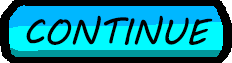
<style>
.page{position:relative;width:232px;height:63px;background:#000000}
.page>*{position:absolute;margin:0}
.t1{font:36px "MVBoli";color:#000000}
</style>
<div class="page">
<p class="t1" style="left:26px;top:15px;width:187px;height:30px">CONTINUE</p>
</div>
